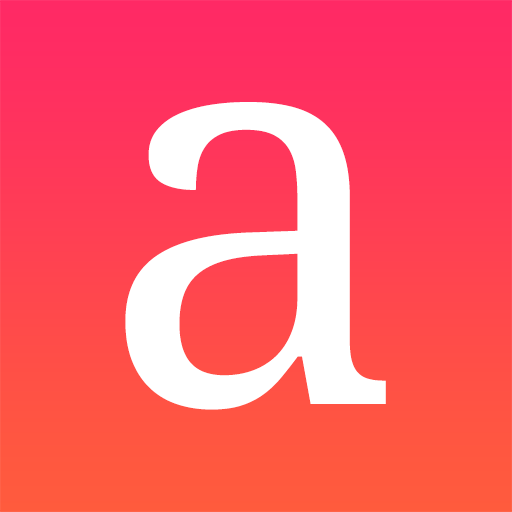
<style>
.page{position:relative;width:512px;height:512px}
.page>*{position:absolute;margin:0}
.t1{font:553px "DroidSerif";color:#ffffff}
</style>
<div class="page">
<p class="t1" style="left:125px;top:102px;width:261px;height:308px">a</p>
</div>
